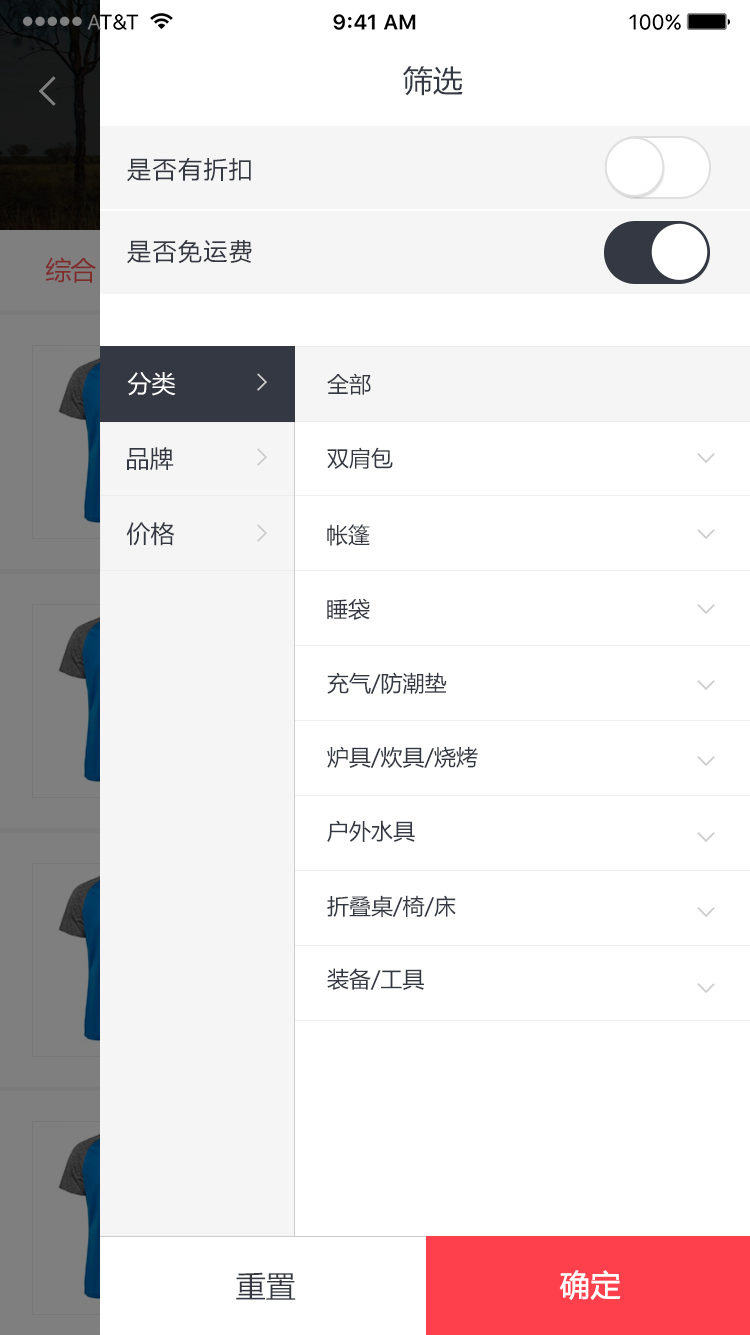
<style>
.page{position:relative;width:750px;height:1335px;background:#ffffff}
.page>*{position:absolute;margin:0}
.t1{font:30px "MicrosoftYaHei";color:#343843}
.t2{font:24px "MicrosoftYaHei";letter-spacing:0.06em;color:#343843}
.t3{font:24px "MicrosoftYaHei";color:#ffffff}
.t4{font:22px "MicrosoftYaHei";color:#343843}
.t5{font:24px "MicrosoftYaHei";color:#343843}
.t6{font:30px "MicrosoftYaHei";color:#ffffff;font-weight:bold}
</style>
<div class="page">
<p class="t1" style="left:403px;top:66px;width:60px;height:30px">筛选</p>
<p class="t2" style="left:127px;top:157px;width:124px;height:25px">是否有折扣</p>
<p class="t2" style="left:127px;top:239px;width:125px;height:25px">是否免运费</p>
<p class="t3" style="left:127px;top:372px;width:49px;height:24px">分类</p>
<p class="t4" style="left:327px;top:373px;width:44px;height:22px">全部</p>
<p class="t5" style="left:127px;top:447px;width:47px;height:24px">品牌</p>
<p class="t4" style="left:327px;top:447px;width:66px;height:22px">双肩包</p>
<p class="t5" style="left:126px;top:522px;width:49px;height:24px">价格</p>
<p class="t4" style="left:327px;top:524px;width:43px;height:22px">帐篷</p>
<p class="t4" style="left:327px;top:598px;width:43px;height:22px">睡袋</p>
<p class="t4" style="left:327px;top:672px;width:120px;height:22px">充气/防潮垫</p>
<p class="t4" style="left:327px;top:746px;width:151px;height:22px">炉具/炊具/烧烤</p>
<p class="t4" style="left:327px;top:820px;width:88px;height:22px">户外水具</p>
<p class="t4" style="left:327px;top:895px;width:129px;height:22px">折叠桌/椅/床</p>
<p class="t4" style="left:327px;top:968px;width:97px;height:22px">装备/工具</p>
<p class="t1" style="left:236px;top:1272px;width:60px;height:28px">重置</p>
<p class="t6" style="left:559px;top:1270px;width:62px;height:30px">确定</p>
</div>
